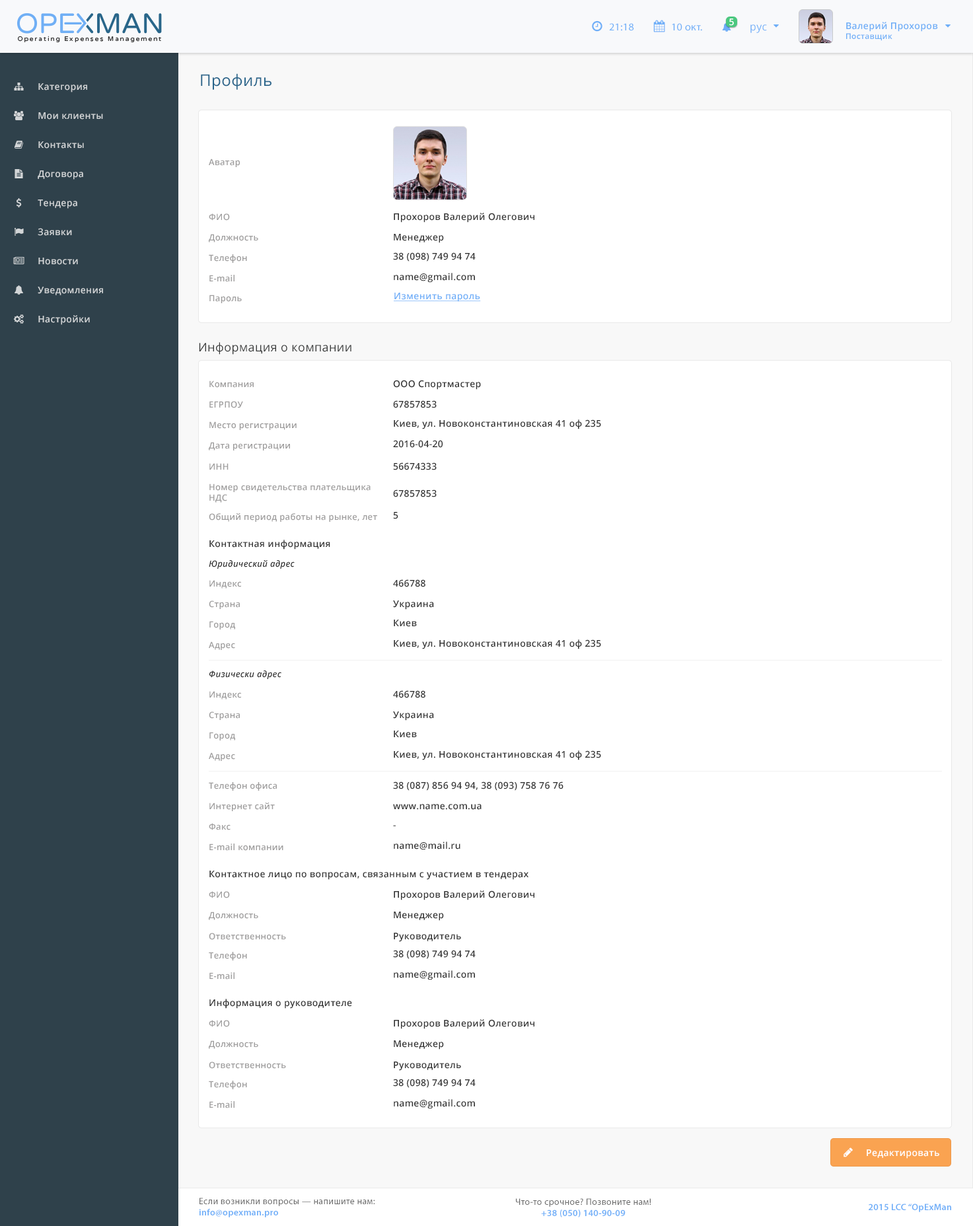
<style>
.page{position:relative;width:973px;height:1226px;background:#ffffff}
.page>*{position:absolute;margin:0}
.t1{font:10.5px "MyriadPro-Regular";letter-spacing:0.025em;color:#6faff8}
.t2{font:9.2px "OpenSans-Semibold";letter-spacing:0.025em;color:#ffffff}
.t3{font:10.5px "OpenSans";letter-spacing:0.025em;color:#6eaff8}
.t4{font:9.2px "OpenSans-Semibold";letter-spacing:0.025em;color:#6eaef7}
.t5{font:7.9px "OpenSans-Semibold";letter-spacing:0.025em;color:#6eaef7}
.t6{font:15.8px "OpenSans";letter-spacing:0.025em;color:#29658b}
.t7{font:9.2px "OpenSans-Semibold";letter-spacing:0.025em;color:#d2d5d7}
.t8{font:8.6px "OpenSans-Semibold";letter-spacing:0.025em;color:#9e9d9d}
.t9{font:9.2px "OpenSans-Semibold";letter-spacing:0.025em;color:#333333}
.t10{font:9.2px "OpenSans-Semibold";letter-spacing:0.025em;color:#6faff8;text-decoration:underline}
.t11{font:11.8px "OpenSans";letter-spacing:0.025em;color:#373838}
.t12{font:8.6px "OpenSans-SemiboldItalic";letter-spacing:0.025em;color:#333333}
.t13{font:9.2px "OpenSans-Semibold";letter-spacing:0.025em}
.t14{font:9.2px "MyriadPro-Regular";letter-spacing:0.025em;color:#696969}
.t15{font:9.2px "MyriadPro-Semibold";letter-spacing:0.025em;color:#6eaef8}
</style>
<div class="page">
<p class="t1" style="left:609px;top:23px;width:25px;height:8px">21:18</p>
<p class="t1" style="left:672px;top:23px;width:30px;height:8px">10 окт.</p>
<p class="t2" style="left:729px;top:18px;width:5px;height:8px">5</p>
<p class="t3" style="left:750px;top:24px;width:17px;height:9px">рус</p>
<p class="t4" style="left:846px;top:22px;width:92px;height:19px">Валерий Прохоров<br><span class="t5">Поставщик</span></p>
<p class="t6" style="left:201px;top:73px;width:70px;height:17px">Профиль</p>
<p class="t7" style="left:38px;top:83px;width:49px;height:9px">Категория</p>
<p class="t7" style="left:38px;top:112px;width:65px;height:8px">Мои клиенты</p>
<p class="t7" style="left:38px;top:141px;width:46px;height:8px">Контакты</p>
<p class="t8" style="left:209px;top:159px;width:31px;height:8px">Аватар</p>
<p class="t7" style="left:38px;top:170px;width:45px;height:10px">Договора</p>
<p class="t7" style="left:38px;top:199px;width:39px;height:10px">Тендера</p>
<p class="t8" style="left:209px;top:213px;width:21px;height:8px">ФИО</p>
<p class="t9" style="left:394px;top:213px;width:140px;height:10px">Прохоров Валерий Олегович</p>
<p class="t7" style="left:38px;top:228px;width:34px;height:8px">Заявки</p>
<p class="t8" style="left:209px;top:234px;width:49px;height:8px">Должность</p>
<p class="t9" style="left:394px;top:234px;width:50px;height:9px">Менеджер</p>
<p class="t7" style="left:38px;top:258px;width:40px;height:7px">Новости</p>
<p class="t8" style="left:209px;top:254px;width:38px;height:9px">Телефон</p>
<p class="t9" style="left:393px;top:252px;width:83px;height:10px">38 (098) 749 94 74</p>
<p class="t8" style="left:209px;top:275px;width:25px;height:7px">E-mail</p>
<p class="t9" style="left:394px;top:273px;width:81px;height:10px">name@gmail.com</p>
<p class="t7" style="left:38px;top:287px;width:65px;height:8px">Уведомления</p>
<p class="t10" style="left:394px;top:293px;width:87px;height:9px">Изменить пароль</p>
<p class="t8" style="left:209px;top:295px;width:33px;height:8px">Пароль</p>
<p class="t7" style="left:38px;top:315px;width:52px;height:10px">Настройки</p>
<p class="t11" style="left:199px;top:342px;width:152px;height:13px">Информация о компании</p>
<p class="t8" style="left:209px;top:380px;width:45px;height:8px">Компания</p>
<p class="t9" style="left:393px;top:380px;width:88px;height:10px">ООО Спортмастер</p>
<p class="t8" style="left:209px;top:401px;width:34px;height:7px">ЕГРПОУ</p>
<p class="t9" style="left:393px;top:400px;width:44px;height:8px">67857853</p>
<p class="t8" style="left:209px;top:421px;width:88px;height:9px">Место регистрации</p>
<p class="t9" style="left:394px;top:419px;width:207px;height:10px">Киев, ул. Новоконстантиновская 41 оф 235</p>
<p class="t8" style="left:209px;top:442px;width:81px;height:8px">Дата регистрации</p>
<p class="t9" style="left:393px;top:440px;width:50px;height:8px">2016-04-20</p>
<p class="t8" style="left:209px;top:463px;width:20px;height:7px">ИНН</p>
<p class="t9" style="left:393px;top:462px;width:44px;height:8px">56674333</p>
<p class="t8" style="left:209px;top:483px;width:162px;height:20px">Номер свидетельства плательщика <br>НДС</p>
<p class="t9" style="left:393px;top:489px;width:44px;height:8px">67857853</p>
<p class="t8" style="left:209px;top:513px;width:168px;height:9px">Общий период работы на рынке, лет</p>
<p class="t9" style="left:393px;top:512px;width:5px;height:7px">5</p>
<p class="t9" style="left:209px;top:540px;width:121px;height:9px">Контактная информация</p>
<p class="t12" style="left:209px;top:560px;width:86px;height:9px">Юридический адрес</p>
<p class="t8" style="left:209px;top:580px;width:32px;height:8px">Индекс</p>
<p class="t9" style="left:393px;top:579px;width:32px;height:8px">466788</p>
<p class="t8" style="left:209px;top:600px;width:31px;height:9px">Страна</p>
<p class="t9" style="left:393px;top:600px;width:41px;height:10px">Украина</p>
<p class="t8" style="left:209px;top:621px;width:26px;height:8px">Город</p>
<p class="t9" style="left:394px;top:619px;width:23px;height:8px">Киев</p>
<p class="t8" style="left:209px;top:641px;width:26px;height:9px">Адрес</p>
<p class="t9" style="left:394px;top:639px;width:207px;height:10px">Киев, ул. Новоконстантиновская 41 оф 235</p>
<p class="t12" style="left:209px;top:670px;width:72px;height:9px">Физически адрес</p>
<p class="t8" style="left:209px;top:691px;width:32px;height:8px">Индекс</p>
<p class="t9" style="left:393px;top:690px;width:32px;height:8px">466788</p>
<p class="t8" style="left:209px;top:711px;width:31px;height:9px">Страна</p>
<p class="t9" style="left:393px;top:711px;width:41px;height:10px">Украина</p>
<p class="t8" style="left:209px;top:732px;width:26px;height:8px">Город</p>
<p class="t9" style="left:394px;top:730px;width:23px;height:8px">Киев</p>
<p class="t8" style="left:209px;top:752px;width:26px;height:9px">Адрес</p>
<p class="t9" style="left:394px;top:750px;width:207px;height:10px">Киев, ул. Новоконстантиновская 41 оф 235</p>
<p class="t8" style="left:209px;top:782px;width:68px;height:9px">Телефон офиса</p>
<p class="t9" style="left:393px;top:781px;width:170px;height:10px">38 (087) 856 94 94, 38 (093) 758 76 76</p>
<p class="t8" style="left:209px;top:802px;width:66px;height:9px">Интернет сайт</p>
<p class="t9" style="left:393px;top:804px;width:88px;height:6px">www.name.com.ua</p>
<p class="t8" style="left:209px;top:823px;width:21px;height:7px">Факс</p>
<p class="t13" style="left:393px;top:825px;width:3px;height:1px">-</p>
<p class="t8" style="left:209px;top:843px;width:74px;height:8px">E-mail компании</p>
<p class="t9" style="left:394px;top:841px;width:66px;height:9px">name@mail.ru</p>
<p class="t9" style="left:209px;top:870px;width:319px;height:10px">Контактное лицо по вопросам, связанным с участием в тендерах</p>
<p class="t8" style="left:209px;top:891px;width:21px;height:7px">ФИО</p>
<p class="t9" style="left:394px;top:890px;width:140px;height:10px">Прохоров Валерий Олегович</p>
<p class="t8" style="left:209px;top:911px;width:49px;height:9px">Должность</p>
<p class="t9" style="left:394px;top:911px;width:50px;height:10px">Менеджер</p>
<p class="t8" style="left:209px;top:933px;width:77px;height:7px">Ответственность</p>
<p class="t9" style="left:394px;top:933px;width:67px;height:9px">Руководитель</p>
<p class="t8" style="left:209px;top:952px;width:38px;height:8px">Телефон</p>
<p class="t9" style="left:393px;top:950px;width:83px;height:9px">38 (098) 749 94 74</p>
<p class="t8" style="left:209px;top:972px;width:25px;height:7px">E-mail</p>
<p class="t9" style="left:394px;top:970px;width:81px;height:10px">name@gmail.com</p>
<p class="t9" style="left:209px;top:999px;width:143px;height:9px">Информация о руководителе</p>
<p class="t8" style="left:209px;top:1020px;width:21px;height:7px">ФИО</p>
<p class="t9" style="left:394px;top:1019px;width:140px;height:10px">Прохоров Валерий Олегович</p>
<p class="t8" style="left:209px;top:1040px;width:49px;height:9px">Должность</p>
<p class="t9" style="left:394px;top:1040px;width:50px;height:9px">Менеджер</p>
<p class="t8" style="left:209px;top:1061px;width:77px;height:8px">Ответственность</p>
<p class="t9" style="left:394px;top:1061px;width:67px;height:10px">Руководитель</p>
<p class="t8" style="left:209px;top:1080px;width:38px;height:9px">Телефон</p>
<p class="t9" style="left:393px;top:1078px;width:83px;height:10px">38 (098) 749 94 74</p>
<p class="t8" style="left:209px;top:1101px;width:25px;height:7px">E-mail</p>
<p class="t9" style="left:394px;top:1099px;width:81px;height:10px">name@gmail.com</p>
<p class="t2" style="left:866px;top:1149px;width:73px;height:9px">Редактировать</p>
<p class="t14" style="left:199px;top:1197px;width:176px;height:20px">Если возникли вопросы — напишите нам:<br><span class="t15">info@opexman.pro</span></p>
<p class="t14" style="left:516px;top:1198px;width:135px;height:19px;text-align:center">Что-то срочное? Позвоните нам!<br><span class="t15">+38 (050) 140-90-09</span></p>
<p class="t15" style="left:868px;top:1203px;width:83px;height:9px">2015 LCC “OpExMan</p>
</div>
